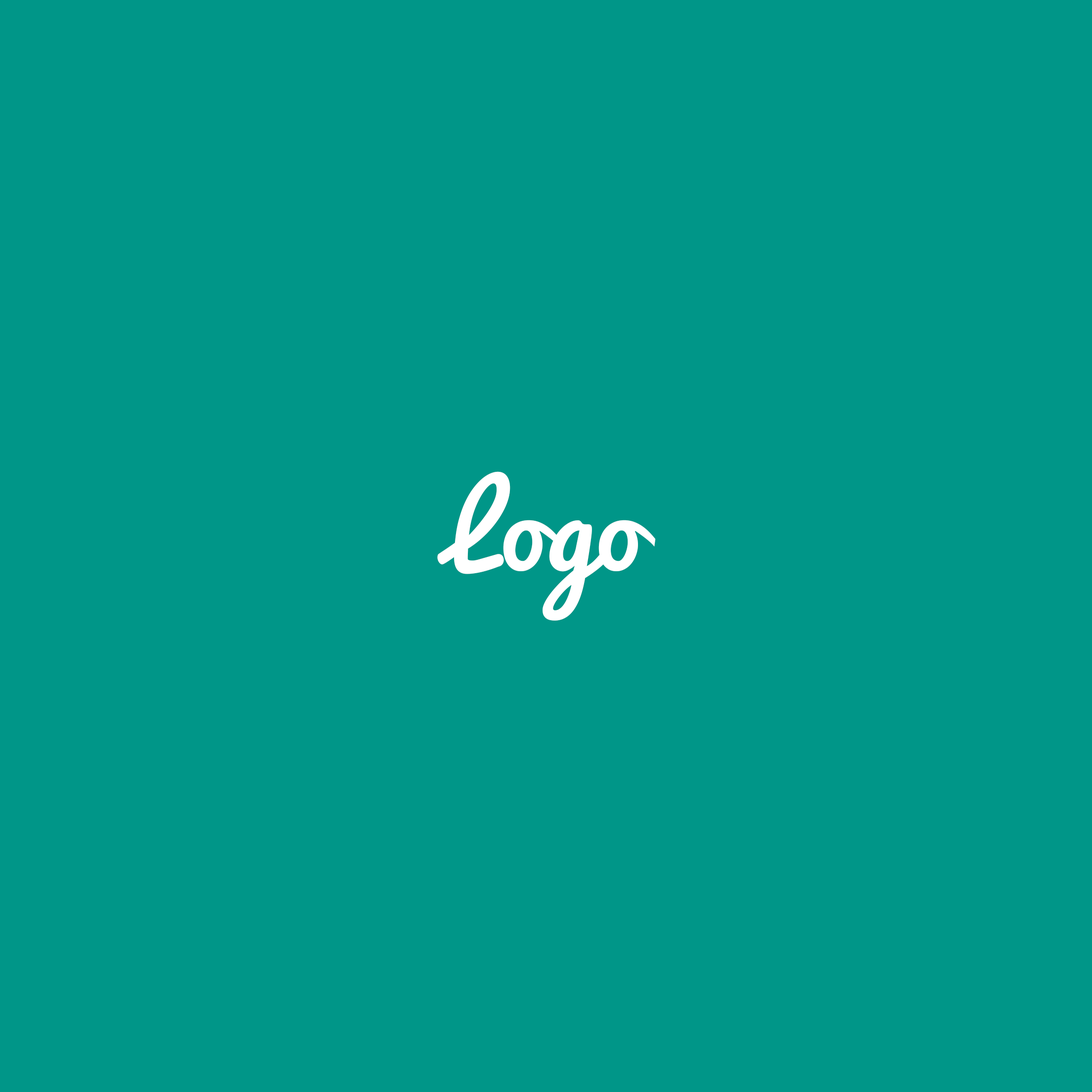
<style>
.page{position:relative;width:1092px;height:1092px;background:#009688}
.page>*{position:absolute;margin:0}
.t1{font:108.8px "Pacifico-Regular";color:#ffffff}
</style>
<div class="page">
<p class="t1" style="left:437px;top:471px;width:219px;height:150px">Logo</p>
</div>
